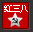
<style>
.page{position:relative;width:33px;height:32px;background:#c50000}
.page>*{position:absolute;margin:0}
.t1{font:10.4px "SimSun";letter-spacing:-0.25em;color:#ffffff}
</style>
<div class="page">
<p class="t1" style="left:4px;top:5px;width:24px;height:8px">红三八</p>
</div>
